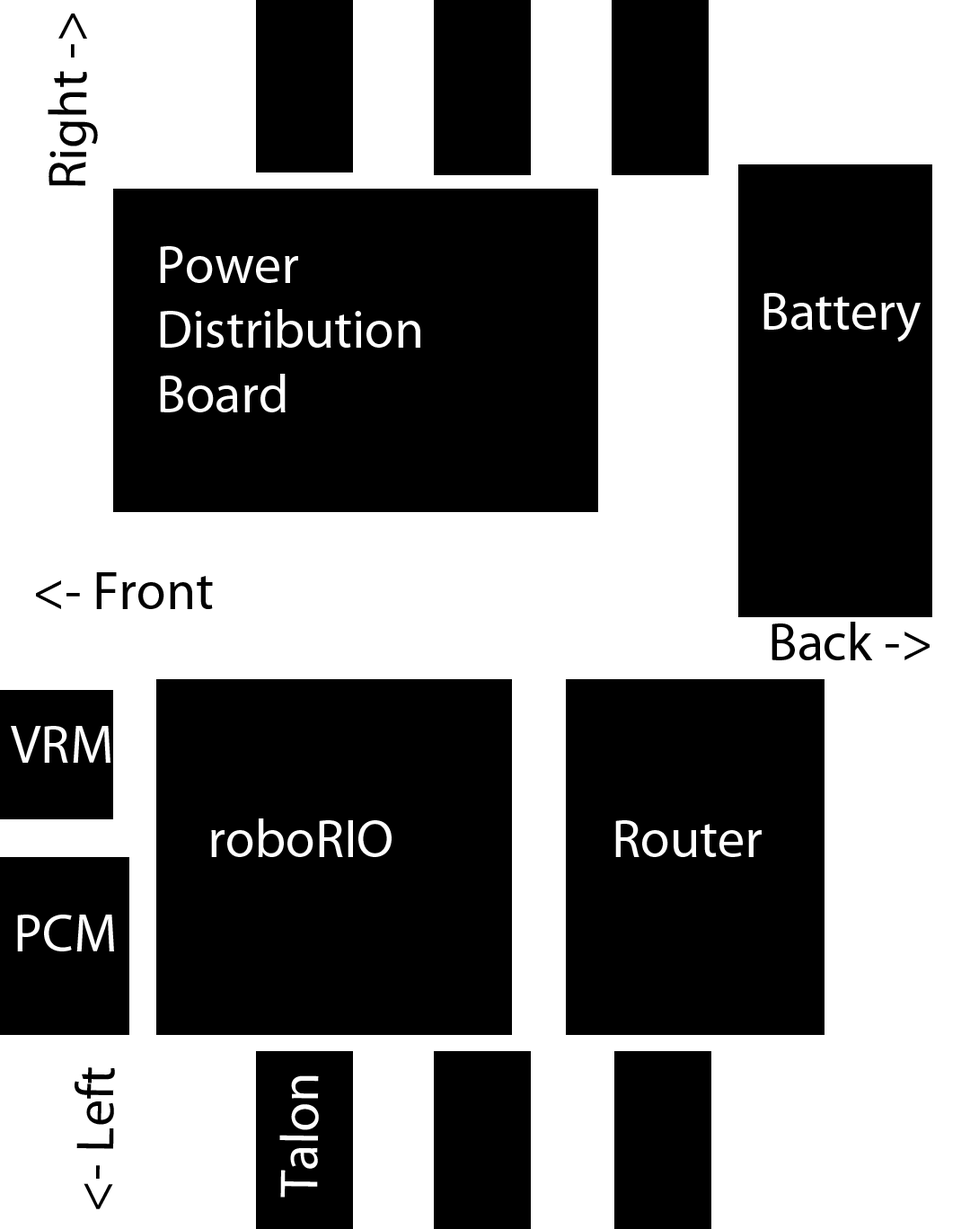
<style>
.page{position:relative;width:970px;height:1229px;background:#ffffff}
.page>*{position:absolute;margin:0}
.t1{font:53.9px "MyriadPro-Regular";color:#000000}
.t2{font:53.9px "MyriadPro-Regular";color:#ffffff}
</style>
<div class="page">
<p class="t1" style="left:48px;top:13px;width:50px;height:173px;rotate:-90deg">Right -&gt;</p>
<p class="t2" style="left:160px;top:246px;width:260px;height:166px">Power<br>Distribution<br>Board</p>
<p class="t2" style="left:764px;top:293px;width:157px;height:49px">Battery</p>
<p class="t1" style="left:36px;top:572px;width:177px;height:37px">&lt;- Front</p>
<p class="t1" style="left:772px;top:622px;width:158px;height:38px">Back -&gt;</p>
<p class="t2" style="left:11px;top:726px;width:100px;height:37px">VRM</p>
<p class="t2" style="left:211px;top:818px;width:181px;height:39px">roboRIO</p>
<p class="t2" style="left:615px;top:820px;width:147px;height:37px">Router</p>
<p class="t2" style="left:17px;top:915px;width:97px;height:36px">PCM</p>
<p class="t1" style="left:75px;top:1067px;width:40px;height:142px;rotate:-89deg">&lt;- Left</p>
<p class="t2" style="left:279px;top:1075px;width:40px;height:123px;rotate:-89deg">Talon</p>
</div>
